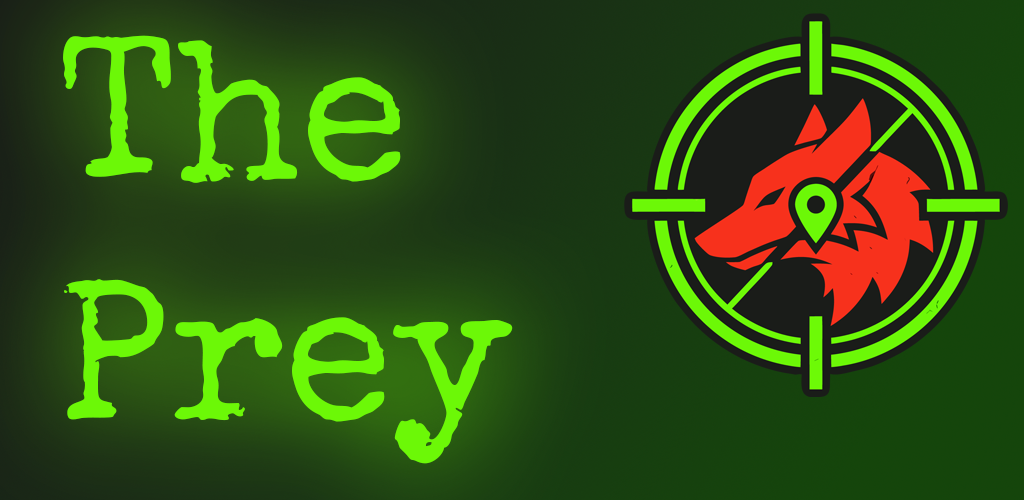
<style>
.page{position:relative;width:1024px;height:500px}
.page>*{position:absolute;margin:0}
.t1{font:200px "SpecialElite-Regular";color:#6cf807}
</style>
<div class="page">
<p class="t1" style="left:63px;top:35px;width:450px;height:429px">The<br>Prey</p>
</div>
